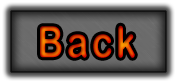
<style>
.page{position:relative;width:178px;height:84px}
.page>*{position:absolute;margin:0}
.t1{font:43.2px "ArialRoundedMTBold";letter-spacing:0.1em;scale:0.83 1}
</style>
<div class="page">
<p class="t1" style="left:40px;top:25px;width:95px;height:33px">Back</p>
</div>
